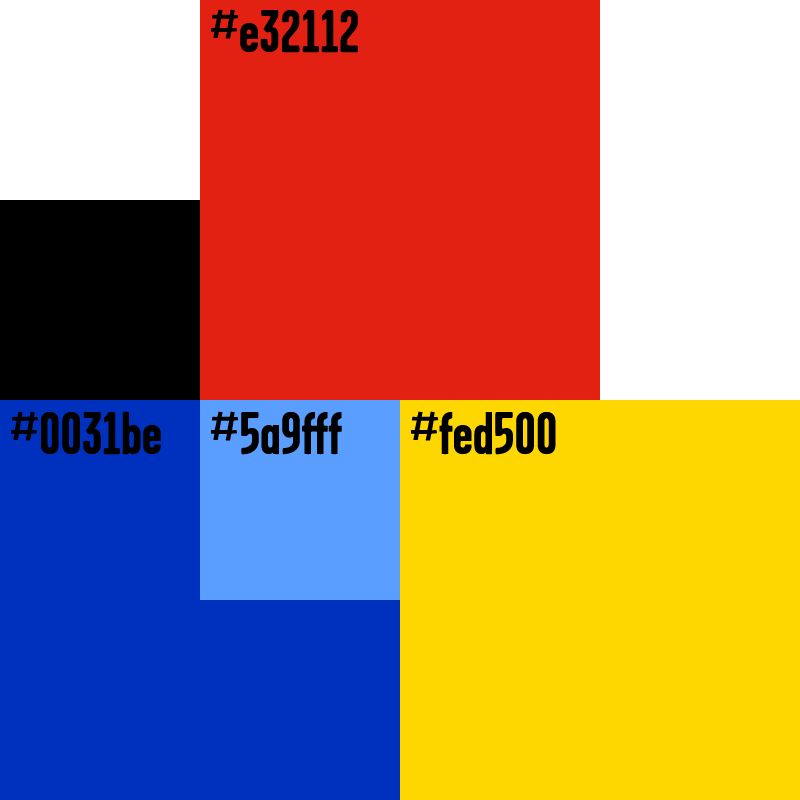
<style>
.page{position:relative;width:800px;height:800px;background:#e32112}
.page>*{position:absolute;margin:0}
.t1{font:60px "GarageGothic-Bold";color:#000000}
</style>
<div class="page">
<p class="t1" style="left:211px;top:9px;width:147px;height:44px">#e32112</p>
<p class="t1" style="left:11px;top:411px;width:150px;height:44px">#0031be</p>
<p class="t1" style="left:211px;top:411px;width:131px;height:44px">#5a9fff</p>
<p class="t1" style="left:411px;top:411px;width:145px;height:44px">#fed500</p>
</div>
